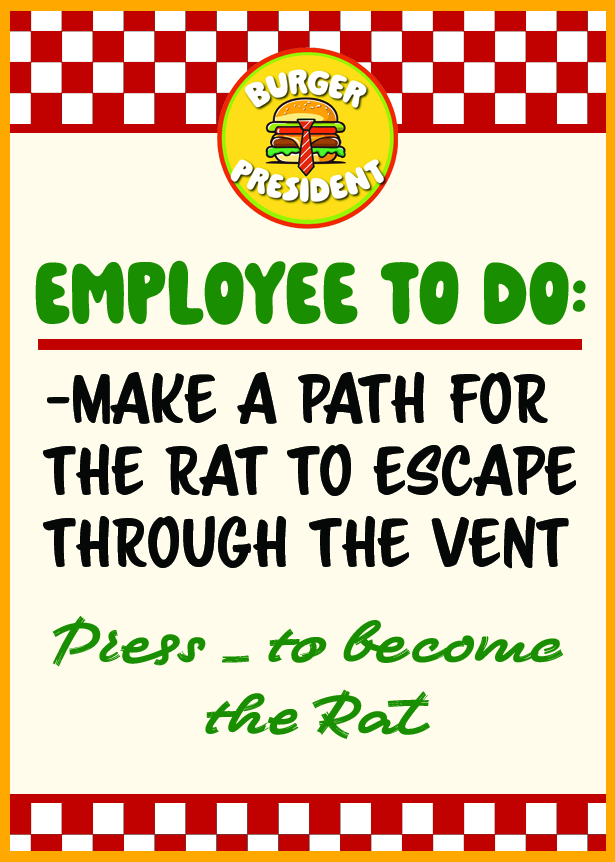
<style>
.page{position:relative;width:615px;height:862px;background:#fffcec}
.page>*{position:absolute;margin:0}
.t1{font:100px "PaindeMie-Regular";color:#198e00}
.t2{font:60px "ScriptoramaMarkdownJF-Regular";color:#060808}
.t3{font:60px "DuosBrushPro-Black";color:#198e00}
</style>
<div class="page">
<p class="t1" style="left:35px;top:260px;width:551px;height:65px">EMPLOYEE To DO:</p>
<p class="t2" style="left:43px;top:372px;width:533px;height:197px">-MAKE A PATH FOR <br>THE RAT TO ESCAPE <br>THROUGH THE VENT</p>
<p class="t3" style="left:52px;top:615px;width:512px;height:124px;text-align:center">Press _ to become<br> the Rat</p>
</div>
